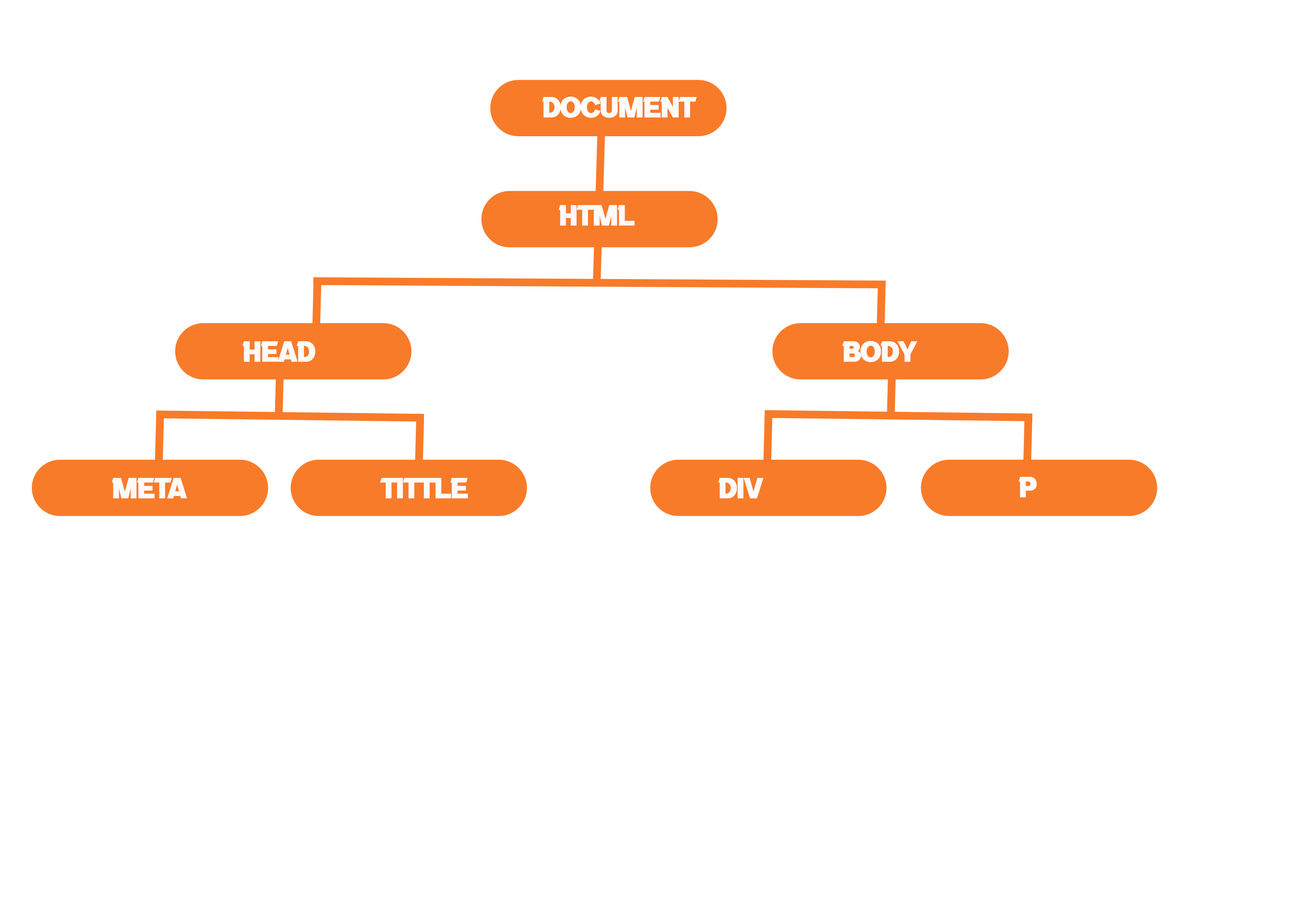
<style>
.page{position:relative;width:1299px;height:918px;background:#ffffff}
.page>*{position:absolute;margin:0}
.t1{font:27.7px "aBlackLives";letter-spacing:-0.025em;color:#fdfafa}
</style>
<div class="page">
<p class="t1" style="left:542px;top:97px;width:155px;height:21px">Document</p>
<p class="t1" style="left:559px;top:205px;width:76px;height:21px">htML</p>
<p class="t1" style="left:242px;top:341px;width:73px;height:21px">HEAD</p>
<p class="t1" style="left:842px;top:341px;width:75px;height:21px">BODY</p>
<p class="t1" style="left:112px;top:478px;width:75px;height:21px">META</p>
<p class="t1" style="left:380px;top:478px;width:88px;height:21px">TITTLE</p>
<p class="t1" style="left:718px;top:478px;width:45px;height:21px">dIV</p>
<p class="t1" style="left:1018px;top:477px;width:19px;height:21px">P</p>
</div>
